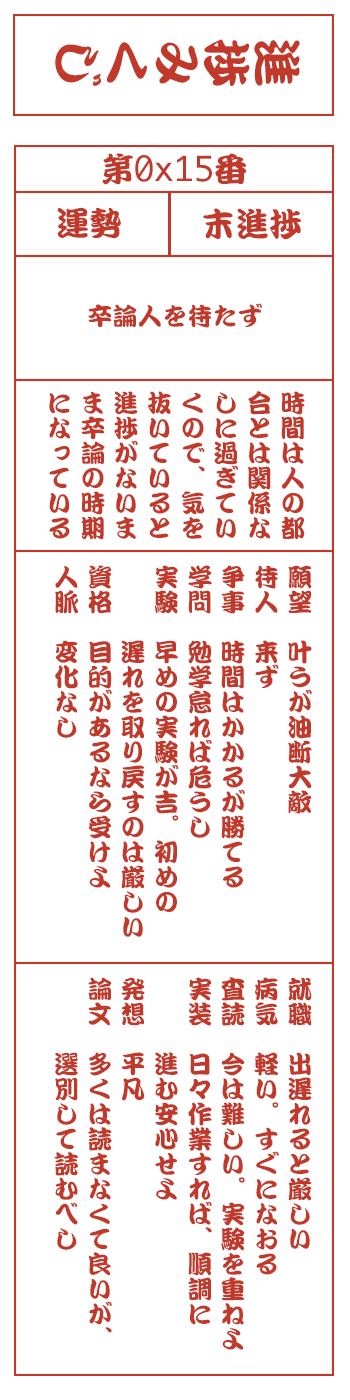
<style>
.page{position:relative;width:350px;height:1400px;background:#ffffff}
.page>*{position:absolute;margin:0}
.t1{font:50px "DFKanTeiRyu-XB-MP-RKSJ-H";color:#c0392b}
.t2{font:33.3px "Monaco";color:#c0392b}
.t3{font:33.3px "DFKanTeiRyu-XB-MP-RKSJ-H";color:#c0392b}
.t4{font:25px "DFKanTeiRyu-XB-MP-RKSJ-H";color:#c0392b}
.t5{font:25px/33.3px "DFKanTeiRyu-XB-MP-RKSJ-H";color:#c0392b}
</style>
<div class="page">
<p class="t1" style="left:55px;top:39px;width:245px;height:47px;rotate:90deg">進捗みくじ</p>
<p class="t2" style="left:102px;top:153px;width:144px;height:32px"><span class="t3">第</span>0x15<span class="t3">番</span></p>
<p class="t3" style="left:57px;top:207px;width:64px;height:31px">運勢</p>
<p class="t3" style="left:203px;top:208px;width:98px;height:32px">末進捗</p>
<p class="t4" style="left:88px;top:303px;width:174px;height:25px">卒論人を待たず</p>
<p class="t5" style="left:49px;top:391px;width:256px;height:149px">時間は人の都<br>合とは関係な<br>しに過ぎてい<br>くので、気を<br>抜いていると<br>進捗がないま<br>ま卒論の時期<br>になっている</p>
<p class="t5" style="left:55px;top:565px;width:257px;height:372px">願望　叶うが油断大敵<br>待人　来ず<br>争事　時間はかかるが勝てる<br>学問　勉学怠れば危うし<br>実験　早めの実験が吉。初めの<br>　　　遅れを取り戻すのは厳しい<br>資格　目的があるなら受けよ<br>人脈　変化なし</p>
<p class="t5" style="left:54px;top:977px;width:258px;height:373px">就職　出遅れると厳しい<br>病気　軽い。すぐになおる<br>査読　今は難しい。実験を重ねよ<br>実装　日々作業すれば、順調に<br>　　　進む安心せよ<br>発想　平凡<br>論文　多くは読まなくて良いが、<br>　　　選別して読むべし</p>
</div>
